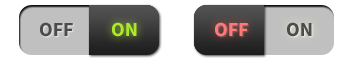
<style>
.page{position:relative;width:350px;height:64px;background:#ffffff}
.page>*{position:absolute;margin:0}
.t1{font:20px "SourceSansPro-Bold";color:#4c4c4c}
.t2{font:20px "SourceSansPro-Bold";color:#aae82a}
.t3{font:20px "SourceSansPro-Bold";color:#ff7979}
</style>
<div class="page">
<p class="t1" style="left:40px;top:22px;width:33px;height:15px">OFF</p>
<p class="t2" style="left:112px;top:22px;width:25px;height:15px">ON</p>
<p class="t3" style="left:215px;top:22px;width:33px;height:15px">OFF</p>
<p class="t1" style="left:287px;top:22px;width:25px;height:15px">ON</p>
</div>
